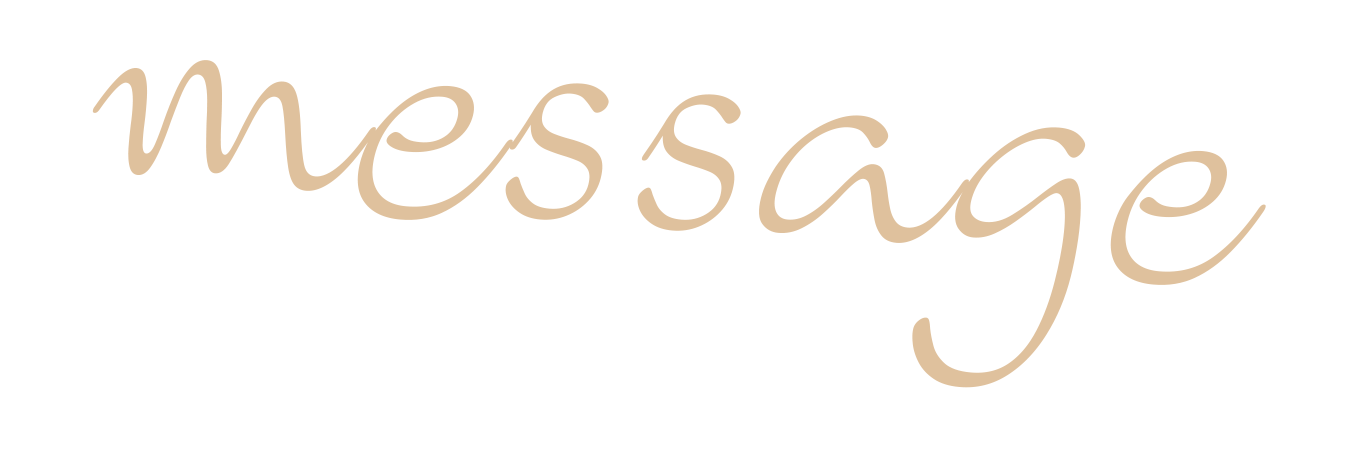
<style>
.page{position:relative;width:1347px;height:452px;background:#ffffff}
.page>*{position:absolute;margin:0}
.t1{font:350px "Ballare-Regular";letter-spacing:0.02em;color:#dfc19d;font-style:italic;scale:0.83 1}
</style>
<div class="page">
<p class="t1" style="left:92px;top:60px;width:1174px;height:328px;rotate:5deg">message</p>
</div>
